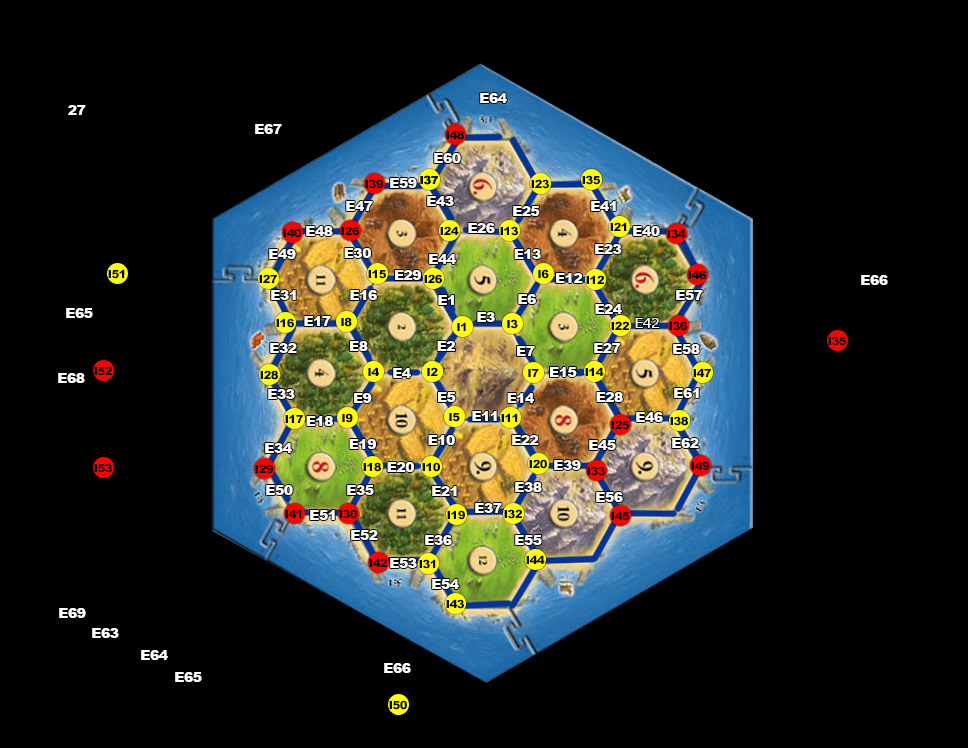
<style>
.page{position:relative;width:968px;height:748px;background:#000000}
.page>*{position:absolute;margin:0}
.t1{font:14px "Arial-Black";letter-spacing:-0.04em;color:#ffffff}
.t2{font:11.2px "Arial-Black";letter-spacing:-0.04em;color:#000000}
.t3{font:14px "Verdana";letter-spacing:-0.04em;color:#ffffff}
</style>
<div class="page">
<p class="t1" style="left:480px;top:93px;width:27px;height:10px">E64</p>
<p class="t1" style="left:68px;top:105px;width:18px;height:10px">27</p>
<p class="t1" style="left:255px;top:124px;width:27px;height:10px">E67</p>
<p class="t2" style="left:446px;top:130px;width:18px;height:10px">I48</p>
<p class="t1" style="left:434px;top:153px;width:27px;height:10px">E60</p>
<p class="t2" style="left:365px;top:179px;width:18px;height:10px">I39</p>
<p class="t1" style="left:390px;top:178px;width:27px;height:10px">E59</p>
<p class="t2" style="left:420px;top:175px;width:18px;height:10px">I37</p>
<p class="t2" style="left:420px;top:175px;width:18px;height:10px">I37</p>
<p class="t2" style="left:531px;top:179px;width:18px;height:10px">I23</p>
<p class="t2" style="left:582px;top:175px;width:18px;height:10px">I35</p>
<p class="t1" style="left:427px;top:196px;width:27px;height:10px">E43</p>
<p class="t1" style="left:346px;top:201px;width:27px;height:10px">E47</p>
<p class="t1" style="left:513px;top:206px;width:27px;height:10px">E25</p>
<p class="t1" style="left:591px;top:201px;width:25px;height:10px">E41</p>
<p class="t2" style="left:610px;top:222px;width:17px;height:9px">I21</p>
<p class="t2" style="left:283px;top:228px;width:18px;height:10px">I40</p>
<p class="t1" style="left:306px;top:226px;width:27px;height:10px">E48</p>
<p class="t2" style="left:341px;top:226px;width:18px;height:10px">I26</p>
<p class="t2" style="left:440px;top:226px;width:19px;height:9px">I24</p>
<p class="t1" style="left:468px;top:223px;width:27px;height:10px">E26</p>
<p class="t2" style="left:500px;top:226px;width:18px;height:10px">I13</p>
<p class="t1" style="left:633px;top:226px;width:27px;height:10px">E40</p>
<p class="t2" style="left:667px;top:229px;width:19px;height:10px">I34</p>
<p class="t1" style="left:595px;top:244px;width:27px;height:10px">E23</p>
<p class="t1" style="left:269px;top:249px;width:27px;height:10px">E49</p>
<p class="t1" style="left:344px;top:248px;width:27px;height:10px">E30</p>
<p class="t1" style="left:429px;top:254px;width:27px;height:10px">E44</p>
<p class="t1" style="left:514px;top:249px;width:27px;height:10px">E13</p>
<p class="t2" style="left:108px;top:269px;width:17px;height:10px">I51</p>
<p class="t2" style="left:368px;top:269px;width:18px;height:10px">I15</p>
<p class="t1" style="left:395px;top:270px;width:26px;height:10px">E29</p>
<p class="t2" style="left:538px;top:269px;width:11px;height:10px">I6</p>
<p class="t2" style="left:688px;top:270px;width:18px;height:10px">I46</p>
<p class="t2" style="left:259px;top:274px;width:18px;height:9px">I27</p>
<p class="t2" style="left:424px;top:274px;width:18px;height:10px">I26</p>
<p class="t1" style="left:556px;top:273px;width:27px;height:10px">E12</p>
<p class="t2" style="left:586px;top:275px;width:18px;height:9px">I12</p>
<p class="t1" style="left:861px;top:275px;width:27px;height:10px">E66</p>
<p class="t1" style="left:271px;top:290px;width:25px;height:10px">E31</p>
<p class="t1" style="left:350px;top:290px;width:27px;height:10px">E16</p>
<p class="t1" style="left:518px;top:294px;width:18px;height:10px">E6</p>
<p class="t1" style="left:676px;top:290px;width:27px;height:10px">E57</p>
<p class="t1" style="left:438px;top:295px;width:16px;height:10px">E1</p>
<p class="t1" style="left:595px;top:304px;width:27px;height:10px">E24</p>
<p class="t1" style="left:66px;top:308px;width:27px;height:10px">E65</p>
<p class="t2" style="left:276px;top:318px;width:18px;height:10px">I16</p>
<p class="t1" style="left:304px;top:316px;width:27px;height:10px">E17</p>
<p class="t2" style="left:341px;top:317px;width:11px;height:10px">I8</p>
<p class="t1" style="left:477px;top:312px;width:18px;height:10px">E3</p>
<p class="t3" style="left:635px;top:318px;width:25px;height:10px">E42</p>
<p class="t2" style="left:457px;top:322px;width:9px;height:9px">I1</p>
<p class="t2" style="left:507px;top:319px;width:11px;height:10px">I3</p>
<p class="t2" style="left:611px;top:321px;width:18px;height:9px">I22</p>
<p class="t2" style="left:669px;top:321px;width:18px;height:10px">I36</p>
<p class="t1" style="left:350px;top:341px;width:18px;height:10px">E8</p>
<p class="t1" style="left:437px;top:341px;width:18px;height:10px">E2</p>
<p class="t2" style="left:828px;top:336px;width:18px;height:10px">I35</p>
<p class="t1" style="left:270px;top:343px;width:27px;height:10px">E32</p>
<p class="t1" style="left:517px;top:346px;width:18px;height:10px">E7</p>
<p class="t1" style="left:594px;top:343px;width:27px;height:10px">E27</p>
<p class="t1" style="left:673px;top:344px;width:27px;height:10px">E58</p>
<p class="t2" style="left:94px;top:366px;width:18px;height:10px">I52</p>
<p class="t1" style="left:58px;top:373px;width:27px;height:10px">E68</p>
<p class="t2" style="left:260px;top:370px;width:18px;height:10px">I28</p>
<p class="t2" style="left:368px;top:367px;width:11px;height:9px">I4</p>
<p class="t1" style="left:393px;top:368px;width:18px;height:10px">E4</p>
<p class="t2" style="left:427px;top:367px;width:11px;height:9px">I2</p>
<p class="t2" style="left:528px;top:369px;width:11px;height:8px">I7</p>
<p class="t1" style="left:550px;top:367px;width:27px;height:10px">E15</p>
<p class="t2" style="left:585px;top:367px;width:19px;height:9px">I14</p>
<p class="t2" style="left:693px;top:368px;width:18px;height:9px">I47</p>
<p class="t1" style="left:268px;top:389px;width:27px;height:10px">E33</p>
<p class="t1" style="left:674px;top:388px;width:25px;height:10px">E61</p>
<p class="t1" style="left:354px;top:393px;width:18px;height:10px">E9</p>
<p class="t1" style="left:438px;top:392px;width:18px;height:10px">E5</p>
<p class="t1" style="left:507px;top:393px;width:27px;height:10px">E14</p>
<p class="t1" style="left:596px;top:392px;width:27px;height:10px">E28</p>
<p class="t2" style="left:285px;top:414px;width:18px;height:9px">I17</p>
<p class="t2" style="left:342px;top:413px;width:11px;height:10px">I9</p>
<p class="t2" style="left:449px;top:413px;width:11px;height:9px">I5</p>
<p class="t1" style="left:472px;top:411px;width:25px;height:10px">E11</p>
<p class="t2" style="left:501px;top:413px;width:17px;height:9px">I11</p>
<p class="t1" style="left:636px;top:412px;width:27px;height:10px">E46</p>
<p class="t1" style="left:306px;top:416px;width:27px;height:10px">E18</p>
<p class="t2" style="left:611px;top:420px;width:18px;height:10px">I25</p>
<p class="t2" style="left:670px;top:416px;width:18px;height:10px">I38</p>
<p class="t1" style="left:428px;top:435px;width:27px;height:10px">E10</p>
<p class="t1" style="left:512px;top:435px;width:27px;height:10px">E22</p>
<p class="t1" style="left:672px;top:438px;width:27px;height:10px">E62</p>
<p class="t1" style="left:265px;top:443px;width:27px;height:10px">E34</p>
<p class="t1" style="left:349px;top:439px;width:27px;height:10px">E19</p>
<p class="t1" style="left:589px;top:440px;width:27px;height:10px">E45</p>
<p class="t2" style="left:363px;top:462px;width:18px;height:10px">I18</p>
<p class="t1" style="left:387px;top:462px;width:27px;height:10px">E20</p>
<p class="t2" style="left:422px;top:462px;width:18px;height:10px">I10</p>
<p class="t2" style="left:529px;top:459px;width:18px;height:10px">I20</p>
<p class="t1" style="left:554px;top:460px;width:27px;height:10px">E39</p>
<p class="t2" style="left:691px;top:461px;width:18px;height:10px">I49</p>
<p class="t2" style="left:94px;top:463px;width:18px;height:10px">I53</p>
<p class="t2" style="left:255px;top:464px;width:18px;height:10px">I29</p>
<p class="t2" style="left:587px;top:466px;width:18px;height:10px">I33</p>
<p class="t1" style="left:266px;top:485px;width:27px;height:10px">E50</p>
<p class="t1" style="left:347px;top:485px;width:27px;height:10px">E35</p>
<p class="t1" style="left:432px;top:486px;width:25px;height:10px">E21</p>
<p class="t1" style="left:515px;top:482px;width:27px;height:10px">E38</p>
<p class="t1" style="left:596px;top:492px;width:27px;height:10px">E56</p>
<p class="t2" style="left:285px;top:509px;width:17px;height:9px">I41</p>
<p class="t1" style="left:310px;top:510px;width:25px;height:10px">E51</p>
<p class="t2" style="left:339px;top:509px;width:18px;height:10px">I30</p>
<p class="t2" style="left:447px;top:510px;width:18px;height:10px">I19</p>
<p class="t1" style="left:475px;top:503px;width:27px;height:10px">E37</p>
<p class="t2" style="left:504px;top:509px;width:18px;height:10px">I32</p>
<p class="t2" style="left:611px;top:511px;width:18px;height:10px">I45</p>
<p class="t1" style="left:351px;top:530px;width:27px;height:10px">E52</p>
<p class="t1" style="left:425px;top:535px;width:27px;height:10px">E36</p>
<p class="t1" style="left:515px;top:535px;width:27px;height:10px">E55</p>
<p class="t2" style="left:369px;top:558px;width:18px;height:9px">I42</p>
<p class="t1" style="left:390px;top:558px;width:27px;height:10px">E53</p>
<p class="t2" style="left:526px;top:555px;width:19px;height:9px">I44</p>
<p class="t2" style="left:419px;top:559px;width:17px;height:10px">I31</p>
<p class="t1" style="left:432px;top:579px;width:27px;height:10px">E54</p>
<p class="t2" style="left:446px;top:599px;width:18px;height:10px">I43</p>
<p class="t1" style="left:59px;top:608px;width:27px;height:10px">E69</p>
<p class="t1" style="left:92px;top:628px;width:27px;height:10px">E63</p>
<p class="t1" style="left:141px;top:650px;width:27px;height:10px">E64</p>
<p class="t1" style="left:384px;top:663px;width:27px;height:10px">E66</p>
<p class="t1" style="left:175px;top:672px;width:27px;height:10px">E65</p>
<p class="t2" style="left:389px;top:700px;width:18px;height:10px">I50</p>
</div>
